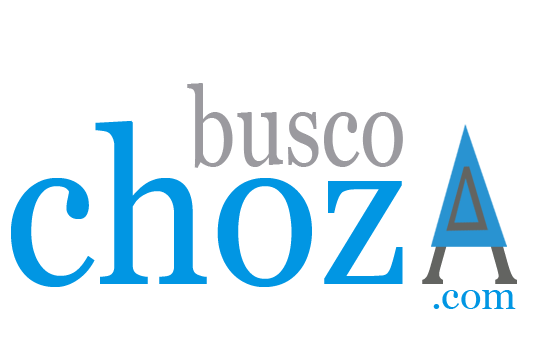
<style>
.page{position:relative;width:550px;height:341px;background:#ffffff}
.page>*{position:absolute;margin:0}
.t1{font:109.4px "Georgia";color:#9b9a9f;scale:0.78 1}
.t2{font:109.5px "Georgia";color:#9b9a9f;scale:0.78 1}
.t3{font:215.1px "Georgia";color:#0196e3;scale:0.93 1}
.t4{font:107.5px "Georgia";color:#230194;scale:0.93 1}
.t5{font:40px "Georgia";color:#0196e3}
</style>
<div class="page">
<p class="t1" style="left:187px;top:83px;width:216px;height:85px"><span class="t2">b</span>usco</p>
<p class="t3" style="left:11px;top:120px;width:392px;height:167px"><span class="t4"><br></span>choz</p>
<p class="t5" style="left:433px;top:290px;width:83px;height:19px">.com</p>
</div>
